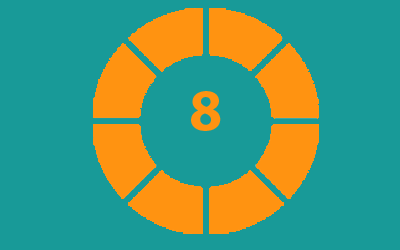
<style>
.page{position:relative;width:400px;height:250px;background:#189a98}
.page>*{position:absolute;margin:0}
.t1{font:60px "MyriadPro-Bold";letter-spacing:0.02em;color:#ff9311}
</style>
<div class="page">
<p class="t1" style="left:191px;top:91px;width:30px;height:40px">8</p>
</div>
